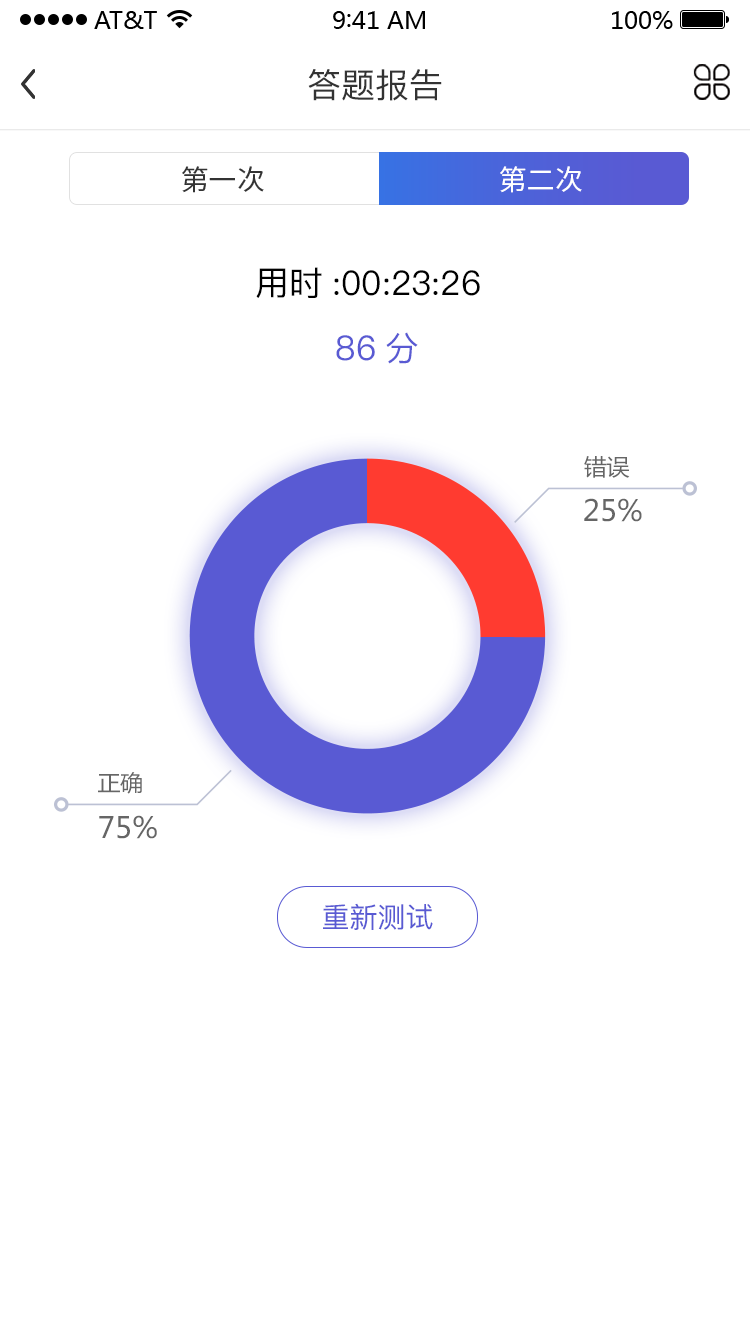
<style>
.page{position:relative;width:750px;height:1334px;background:#ffffff}
.page>*{position:absolute;margin:0}
.t1{font:34px "PingFang-SC-Medium";color:#333333}
.t2{font:28px "SourceHanSansCN-Regular";color:#333333}
.t3{font:28px "SourceHanSansCN-Regular";color:#ffffff}
.t4{font:34px "PingFang-SC-Medium";color:#000000}
.t5{font:34px "PingFang-SC-Medium";color:#595ad3}
.t6{font:22.6px "MicrosoftYaHei";color:#666666}
.t7{font:29px "MicrosoftYaHei";color:#666666}
.t8{font:28px "PingFang-SC-Medium";color:#595ad3}
</style>
<div class="page">
<p class="t1" style="left:308px;top:69px;width:134px;height:32px">答题报告</p>
<p class="t2" style="left:182px;top:166px;width:82px;height:27px">第一次</p>
<p class="t3" style="left:500px;top:166px;width:82px;height:27px">第二次</p>
<p class="t4" style="left:256px;top:267px;width:224px;height:31px">用时:00:23:26</p>
<p class="t5" style="left:336px;top:332px;width:82px;height:32px">86分</p>
<p class="t6" style="left:584px;top:456px;width:46px;height:22px">错误</p>
<p class="t7" style="left:584px;top:498px;width:58px;height:24px">25%</p>
<p class="t6" style="left:98px;top:772px;width:44px;height:22px">正确</p>
<p class="t7" style="left:99px;top:815px;width:58px;height:24px">75%</p>
<p class="t8" style="left:323px;top:903px;width:110px;height:27px">重新测试</p>
</div>
